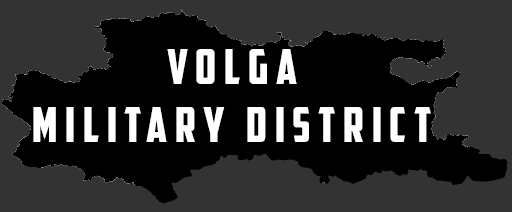
<style>
.page{position:relative;width:512px;height:212px;background:#333333}
.page>*{position:absolute;margin:0}
.t1{font:48px "AmericanCaptain";letter-spacing:0.16em;color:#ffffff}
</style>
<div class="page">
<p class="t1" style="left:33px;top:49px;width:398px;height:93px;text-align:center">volga<br>military district</p>
</div>
